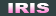
<style>
.page{position:relative;width:56px;height:16px;background:#314242}
.page>*{position:absolute;margin:0}
.t1{font:12.9px "Arial-Black";scale:1.45 1}
</style>
<div class="page">
<p class="t1" style="left:8px;top:3px;width:41px;height:10px">IRIS</p>
</div>
